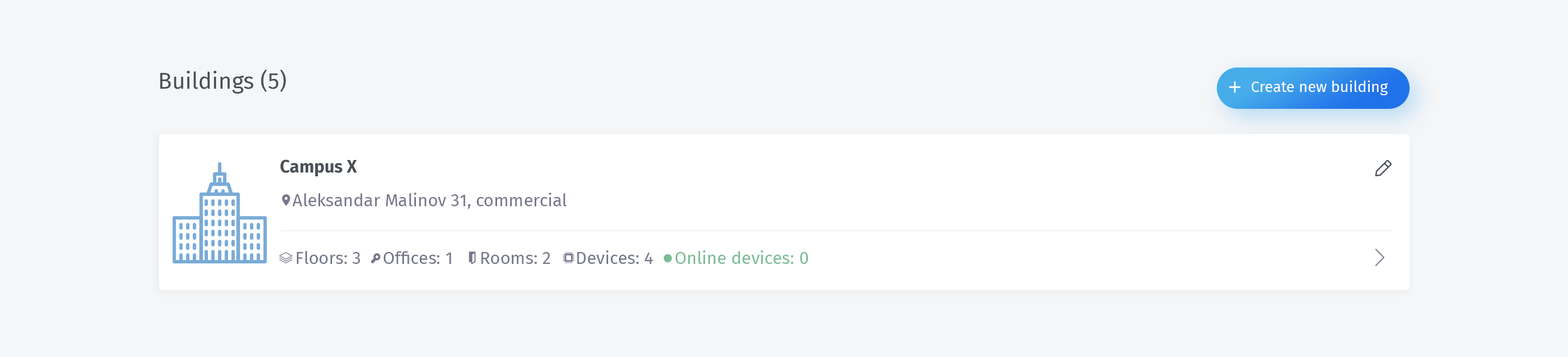
<style>
.page{position:relative;width:1568px;height:357px;background:#f5f6f8}
.page>*{position:absolute;margin:0}
.t1{font:22.9px "FiraSans-Regular";color:#4a5056}
.t2{font:15.2px "FiraSans-Regular";color:#ffffff}
.t3{font:17.4px "FiraSans-Bold";color:#4a5056}
.t4{font:17.4px "FiraSans-Regular";color:#75788b}
.t5{font:17.4px "FiraSans-Regular";color:#7abc96}
</style>
<div class="page">
<p class="t1" style="left:160px;top:69px;width:126px;height:25px">Buildings (5)</p>
<p class="t2" style="left:1252px;top:81px;width:136px;height:14px">Create new building</p>
<p class="t3" style="left:280px;top:160px;width:77px;height:17px">Campus X</p>
<p class="t4" style="left:292px;top:193px;width:275px;height:16px">Aleksandar Malinov 31, commercial</p>
<p class="t4" style="left:297px;top:251px;width:63px;height:13px">Floors: 3</p>
<p class="t4" style="left:383px;top:251px;width:68px;height:13px">Offices: 1</p>
<p class="t4" style="left:481px;top:252px;width:69px;height:12px">Rooms: 2</p>
<p class="t4" style="left:577px;top:250px;width:76px;height:14px">Devices: 4</p>
<p class="t5" style="left:675px;top:250px;width:133px;height:14px">Online devices: 0</p>
</div>
